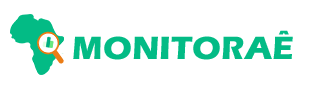
<style>
.page{position:relative;width:314px;height:102px;background:#ffffff}
.page>*{position:absolute;margin:0}
.t1{font:33.3px "ErasITC-Bold";letter-spacing:0.005em;color:#03bb85}
</style>
<div class="page">
<p class="t1" style="left:73px;top:30px;width:220px;height:30px">MONITORAÊ</p>
</div>
